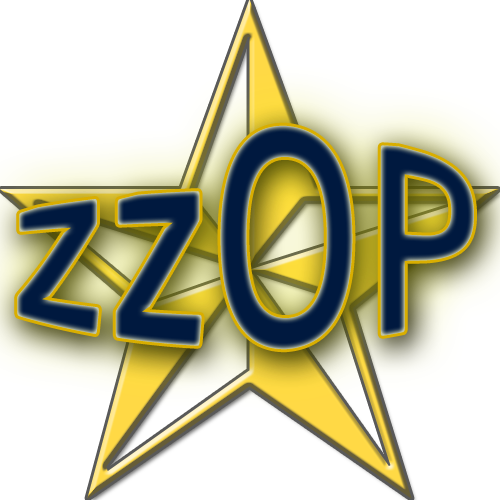
<style>
.page{position:relative;width:500px;height:500px;background:#ffffff}
.page>*{position:absolute;margin:0}
.t1{font:200px "Mentone-SemiBold"}
</style>
<div class="page">
<p class="t1" style="left:17px;top:125px;width:457px;height:225px">zzOP</p>
</div>
